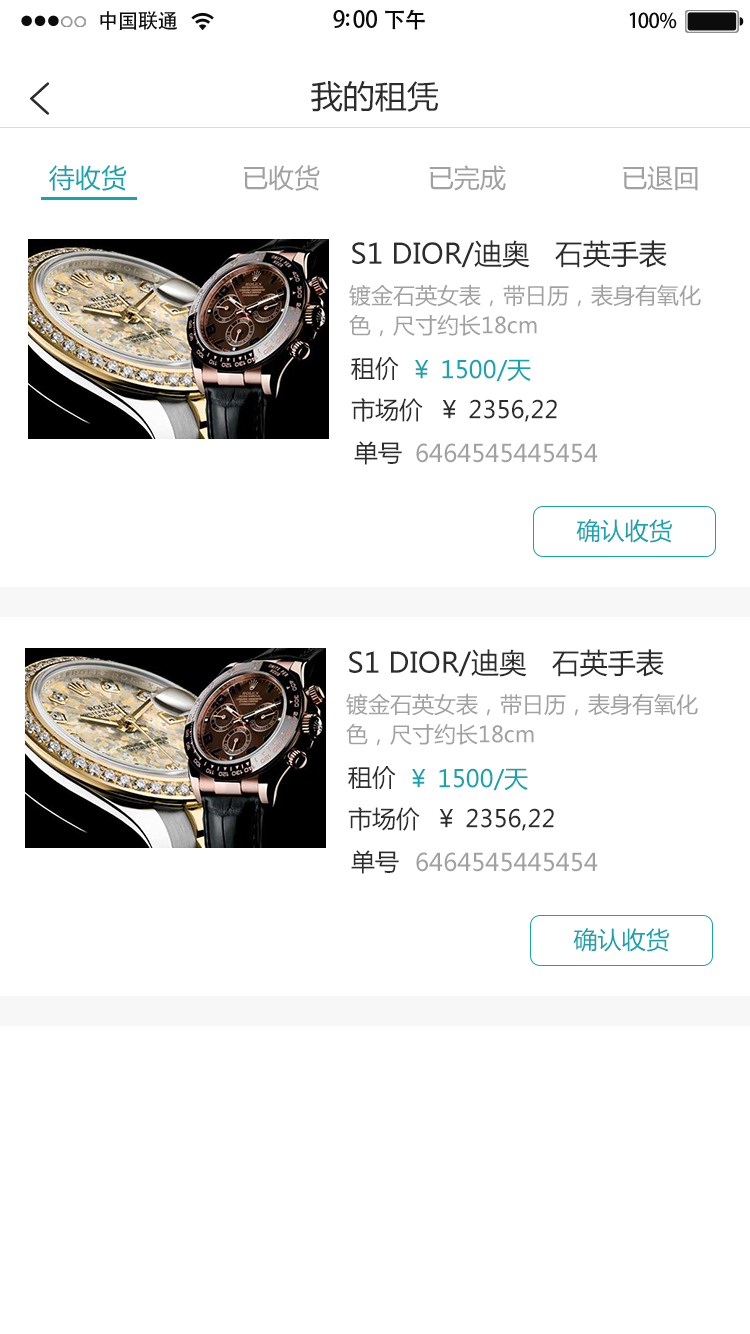
<style>
.page{position:relative;width:750px;height:1334px;background:#ffffff}
.page>*{position:absolute;margin:0}
.t1{font:20.4px "AdobeHeitiStd-Regular";letter-spacing:-0.02em;color:#000000}
.t2{font:23px "AdobeHeitiStd-Regular";letter-spacing:-0.02em;color:#000000}
.t3{font:22px "AdobeHeitiStd-Regular";letter-spacing:-0.02em;color:#000000}
.t4{font:20.4px "AdobeHeitiStd-Regular";letter-spacing:-0.02em;color:#010101}
.t5{font:32px "MicrosoftYaHei";color:#2c2c2c}
.t6{font:26px "MicrosoftYaHei";color:#a1a1a1}
.t7{font:26px "MicrosoftYaHei";color:#2c2c2c}
.t8{font:26px "MicrosoftYaHei";color:#16a4ae}
.t9{font:28px "MicrosoftYaHei";color:#2c2c2c}
.t10{font:22px/15px "MicrosoftYaHei";color:#a1a1a1}
.t11{font:24px "MicrosoftYaHei";color:#2c2c2c}
.t12{font:24px "MicrosoftYaHei";color:#16a4ae}
.t13{font:24px "MicrosoftYaHei";color:#a1a1a1}
</style>
<div class="page">
<p class="t1" style="left:100px;top:11px;width:77px;height:19px">中国联通</p>
<p class="t2" style="left:333px;top:9px;width:92px;height:21px">9:00 <span class="t3">下午</span></p>
<p class="t4" style="left:629px;top:12px;width:48px;height:17px">100%</p>
<p class="t5" style="left:311px;top:81px;width:127px;height:31px">我的租凭</p>
<p class="t6" style="left:49px;top:165px;width:649px;height:26px"><span class="t7"> </span><span class="t8">待收货               </span>已收货              已完成               已退回</p>
<p class="t9" style="left:352px;top:240px;width:315px;height:28px">S1 DIOR/迪奥   石英手表</p>
<p class="t10" style="left:349px;top:284px;width:352px;height:53px">镀金石英女表，带日历，表身有氧化<br><br>色，尺寸约长18cm</p>
<p class="t11" style="left:351px;top:357px;width:48px;height:24px">租价</p>
<p class="t12" style="left:415px;top:359px;width:116px;height:23px">￥ 1500/天</p>
<p class="t11" style="left:351px;top:398px;width:206px;height:24px">市场价  ￥ 2356,22</p>
<p class="t11" style="left:354px;top:441px;width:48px;height:24px">单号</p>
<p class="t13" style="left:416px;top:443px;width:182px;height:20px">6464545445454</p>
<p class="t12" style="left:576px;top:519px;width:96px;height:24px">确认收货</p>
<p class="t9" style="left:349px;top:649px;width:315px;height:28px">S1 DIOR/迪奥   石英手表</p>
<p class="t10" style="left:346px;top:693px;width:352px;height:53px">镀金石英女表，带日历，表身有氧化<br><br>色，尺寸约长18cm</p>
<p class="t11" style="left:348px;top:766px;width:48px;height:24px">租价</p>
<p class="t12" style="left:412px;top:768px;width:116px;height:23px">￥ 1500/天</p>
<p class="t11" style="left:348px;top:807px;width:206px;height:24px">市场价  ￥ 2356,22</p>
<p class="t11" style="left:351px;top:850px;width:48px;height:24px">单号</p>
<p class="t13" style="left:416px;top:852px;width:182px;height:20px">6464545445454</p>
<p class="t12" style="left:573px;top:928px;width:96px;height:24px">确认收货</p>
</div>
